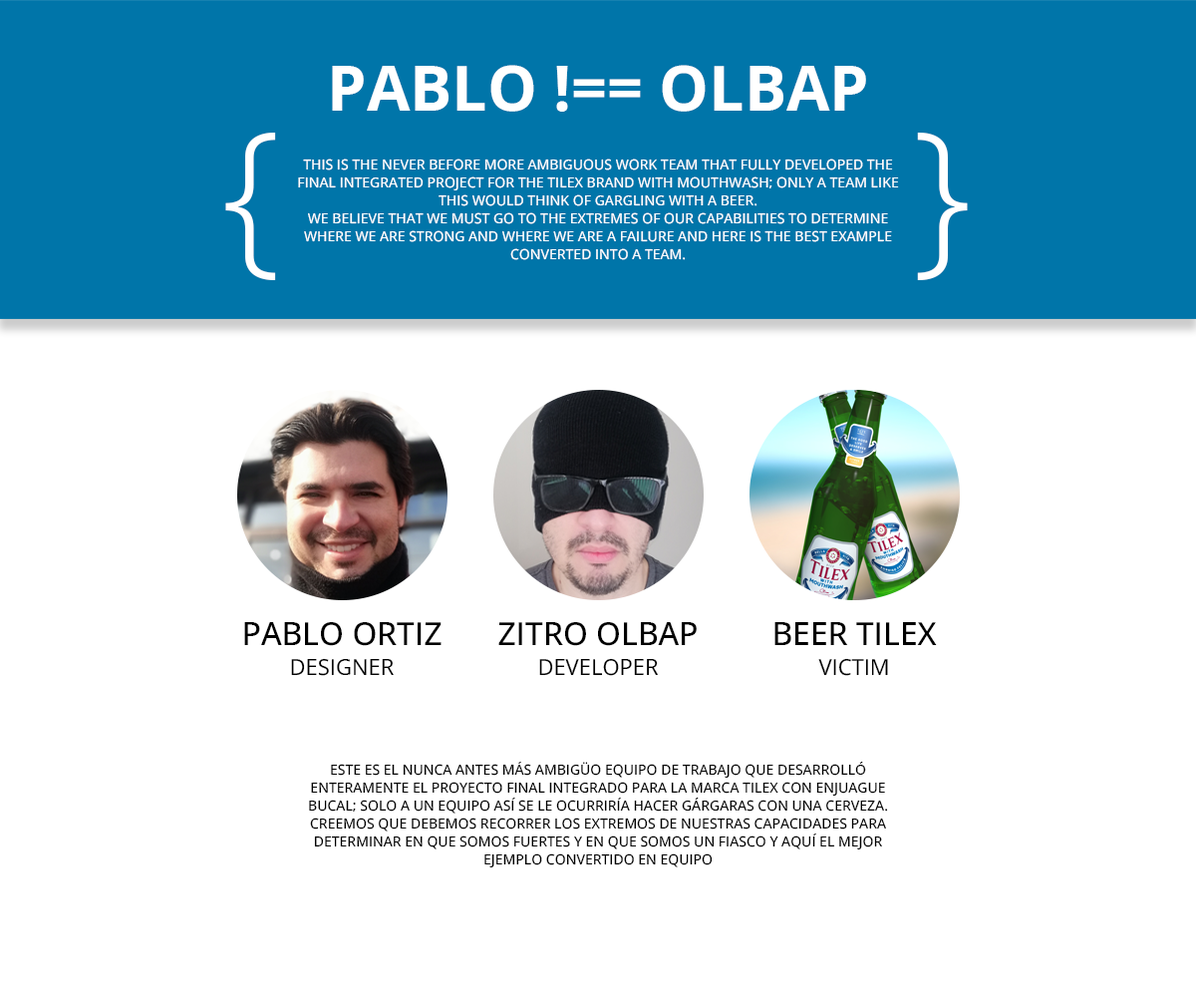
<style>
.page{position:relative;width:1196px;height:997px;background:#ffffff}
.page>*{position:absolute;margin:0}
.t1{font:62.6px "OpenSans-Bold";color:#ffffff;text-transform:uppercase}
.t2{font:169.2px "OpenSans-Light";color:#ffffff;text-transform:uppercase}
.t3{font:14px/17.9px "OpenSans-Medium";color:#ffffff;text-transform:uppercase}
.t4{font:31.7px "OpenSans-Medium";color:#000000;text-transform:uppercase}
.t5{font:21.9px "OpenSans-Regular";color:#000000;text-transform:uppercase}
.t6{font:14px/17.9px "OpenSans-Medium";color:#000000;text-transform:uppercase}
</style>
<div class="page">
<p class="t1" style="left:332px;top:65px;width:534px;height:47px">pablo !== olbap</p>
<p class="t2" style="left:225px;top:133px;width:51px;height:147px">{</p>
<p class="t2" style="left:917px;top:133px;width:51px;height:147px">}</p>
<p class="t3" style="left:298px;top:158px;width:601px;height:102px;text-align:center">This is the never before more ambiguous work team that fully developed the final integrated project for the tilex brand with mouthwash; only a team like this would think of gargling with a beer.<br>We believe that we must go to the extremes of our capabilities to determine where we are strong and where we are a failure and here is the best example converted into a team.</p>
<p class="t4" style="left:244px;top:622px;width:198px;height:24px">Pablo ortiz</p>
<p class="t4" style="left:498px;top:622px;width:199px;height:24px">zitro olbap</p>
<p class="t4" style="left:775px;top:622px;width:162px;height:23px">beer tilex</p>
<p class="t5" style="left:291px;top:658px;width:103px;height:18px">designer</p>
<p class="t5" style="left:539px;top:658px;width:120px;height:18px">developer</p>
<p class="t5" style="left:818px;top:658px;width:70px;height:18px">victim</p>
<p class="t6" style="left:309px;top:762px;width:579px;height:105px;text-align:center">Este es el nunca antes más ambigüo equipo de trabajo que desarrolló enteramente el proyecto final integrado para la marca tilex con enjuague bucal; solo a un equipo así se le ocurriría hacer gárgaras con una cerveza.<br>Creemos que debemos recorrer los extremos de nuestras capacidades para determinar en que somos fuertes y en que somos un fiasco y aquí el mejor ejemplo convertido en equipo</p>
</div>
